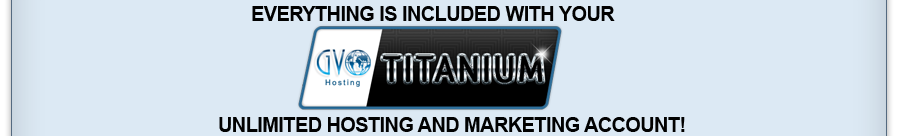
<style>
.page{position:relative;width:899px;height:136px;background:#dce9f4}
.page>*{position:absolute;margin:0}
.t1{font:19.8px "Arial-BoldMT";letter-spacing:-0.025em;color:#010101}
</style>
<div class="page">
<p class="t1" style="left:252px;top:6px;width:363px;height:15px">EVERYTHING IS INCLUDED WITH YOUR</p>
<p class="t1" style="left:219px;top:117px;width:466px;height:15px">UNLIMITED HOSTING AND MARKETING ACCOUNT!</p>
</div>
